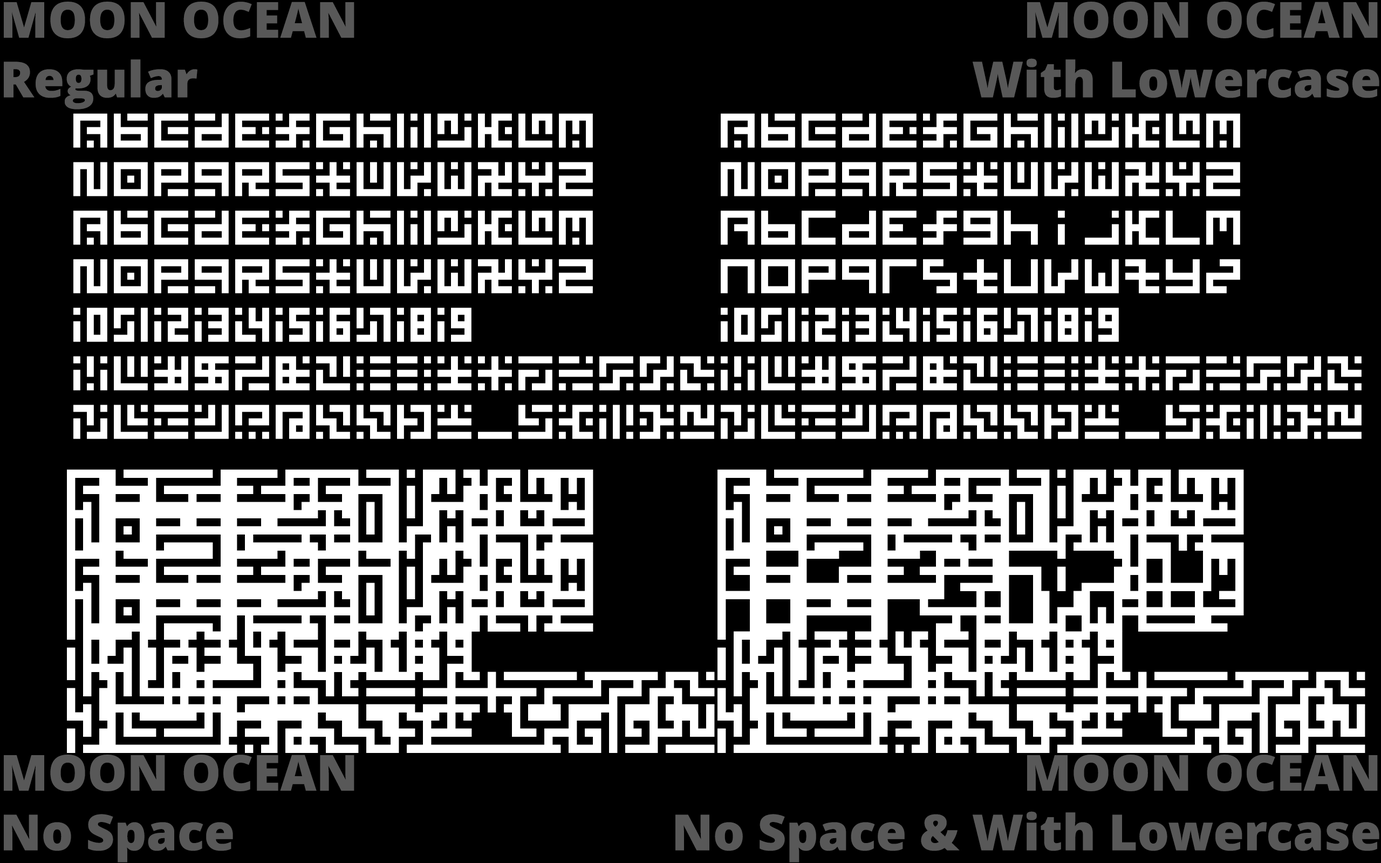
<style>
.page{position:relative;width:1381px;height:863px;background:#000000}
.page>*{position:absolute;margin:0}
.t1{font:49.6px "OpenSans-Extrabold";color:#585858}
.t2{font:40.5px "MoonOcean";color:#ffffff}
.t3{font:40.5px "MoonOceanL";color:#ffffff}
.t4{font:40.5px/40.5px "MoonOceanNS";color:#ffffff}
.t5{font:40.5px/40.5px "MoonOceanLNS";color:#ffffff}
</style>
<div class="page">
<p class="t1" style="left:4px;top:2px;width:350px;height:108px">MOON OCEAN<br>Regular</p>
<p class="t1" style="left:973px;top:2px;width:407px;height:96px;text-align:right">MOON OCEAN<br>With Lowercase</p>
<p class="t2" style="left:73px;top:113px;width:641px;height:326px">ABCDEFGHIJKLM<br>NOPQRSTUVWXYZ<br>abcdefghijklm<br>nopqrstuvwxyz<br>0123456789<br>!"#$%&amp;'()*+,-./:<br>;&lt;=&gt;?@[\]^_`{|}~</p>
<p class="t3" style="left:721px;top:113px;width:641px;height:326px">ABCDEFGHIJKLM<br>NOPQRSTUVWXYZ<br>abcdefghijklm<br>nopqrstuvwxyz<br>0123456789<br>!"#$%&amp;'()*+,-./:<br>;&lt;=&gt;?@[\]^_`{|}~</p>
<p class="t4" style="left:67px;top:469px;width:648px;height:284px">ABCDEFGHIJKLM<br>NOPQRSTUVWXYZ<br>abcdefghijklm<br>nopqrstuvwxyz<br>0123456789<br>!"#$%&amp;'()*+,-./:<br>;&lt;=&gt;?@[\]^_`{|}~</p>
<p class="t5" style="left:718px;top:469px;width:648px;height:284px">ABCDEFGHIJKLM<br>NOPQRSTUVWXYZ<br>abcdefghijklm<br>nopqrstuvwxyz<br>0123456789<br>!"#$%&amp;'()*+,-./:<br>;&lt;=&gt;?@[\]^_`{|}~</p>
<p class="t1" style="left:4px;top:755px;width:350px;height:108px">MOON OCEAN<br>No Space</p>
<p class="t1" style="left:676px;top:755px;width:704px;height:108px;text-align:right">MOON OCEAN<br>No Space &amp; With Lowercase</p>
</div>
